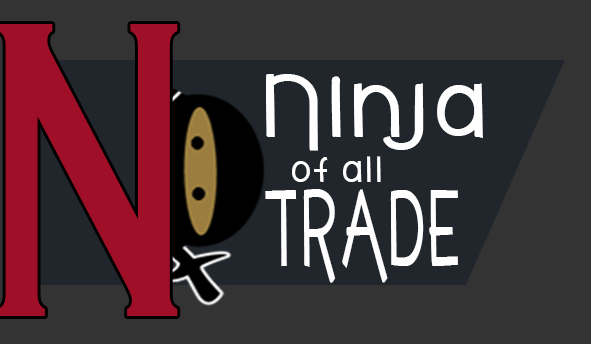
<style>
.page{position:relative;width:591px;height:344px;background:#333333}
.page>*{position:absolute;margin:0}
.t1{font:437.3px "CopperplateGothic-Bold";color:#9f0f27;scale:0.54 1}
.t2{font:97.9px "cafebrewerybold-Regular";letter-spacing:0.08em;color:#fffefe}
.t3{font:38.9px "cafebrewerybold-Regular";letter-spacing:0.08em;color:#fffefe}
.t4{font:118px "cafebrewerybold-Regular";letter-spacing:0.08em;color:#fffefe;scale:0.54 1}
</style>
<div class="page">
<p class="t1" style="left:0px;top:24px;width:178px;height:292px">N</p>
<p class="t2" style="left:266px;top:74px;width:217px;height:77px">Ninja</p>
<p class="t3" style="left:292px;top:156px;width:89px;height:26px">of all</p>
<p class="t4" style="left:265px;top:189px;width:193px;height:94px">TRADE</p>
</div>
